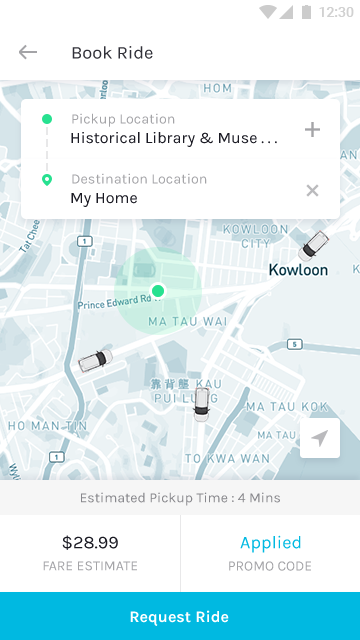
<style>
.page{position:relative;width:360px;height:640px;background:#ffffff}
.page>*{position:absolute;margin:0}
.t1{font:18px "Karla-Regular";color:#1b1b24}
.t2{font:14.1px "Karla-Regular";color:#a4a4a7}
.t3{font:16px "Karla-Regular";color:#1b1b24}
.t4{font:14px "Karla-Regular";color:#88888d}
.t5{font:18px "Karla-Regular";color:#1b1b24;text-transform:uppercase}
.t6{font:18px "Karla-Regular";color:#00b9e1}
.t7{font:14px "Karla-Regular";color:#a4a4a7;text-transform:uppercase}
.t8{font:14.1px "Karla-Regular";color:#a4a4a7;text-transform:uppercase}
.t9{font:16px "Karla-Bold";color:#ffffff}
</style>
<div class="page">
<p class="t1" style="left:72px;top:46px;width:81px;height:13px;opacity:0.9">Book Ride</p>
<p class="t2" style="left:72px;top:113px;width:103px;height:14px">Pickup Location</p>
<p class="t3" style="left:71px;top:132px;width:206px;height:15px">Historical Library &amp; Muse . . .</p>
<p class="t2" style="left:72px;top:173px;width:135px;height:11px">Destination Location</p>
<p class="t3" style="left:71px;top:193px;width:66px;height:14px">My Home</p>
<p class="t4" style="left:81px;top:492px;width:199px;height:14px">Estimated Pickup Time : 4 Mins</p>
<p class="t5" style="left:62px;top:535px;width:56px;height:15px">$28.99</p>
<p class="t6" style="left:240px;top:535px;width:61px;height:18px">Applied</p>
<p class="t7" style="left:43px;top:561px;width:94px;height:10px">Fare Estimate</p>
<p class="t8" style="left:229px;top:561px;width:82px;height:10px">PROMO CODE</p>
<p class="t9" style="left:130px;top:610px;width:99px;height:16px">Request Ride</p>
</div>
